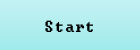
<style>
.page{position:relative;width:140px;height:50px}
.page>*{position:absolute;margin:0}
.t1{font:15px "Terminal";color:#000000;scale:0.91 1}
</style>
<div class="page">
<p class="t1" style="left:45px;top:20px;width:48px;height:12px">Start</p>
</div>
